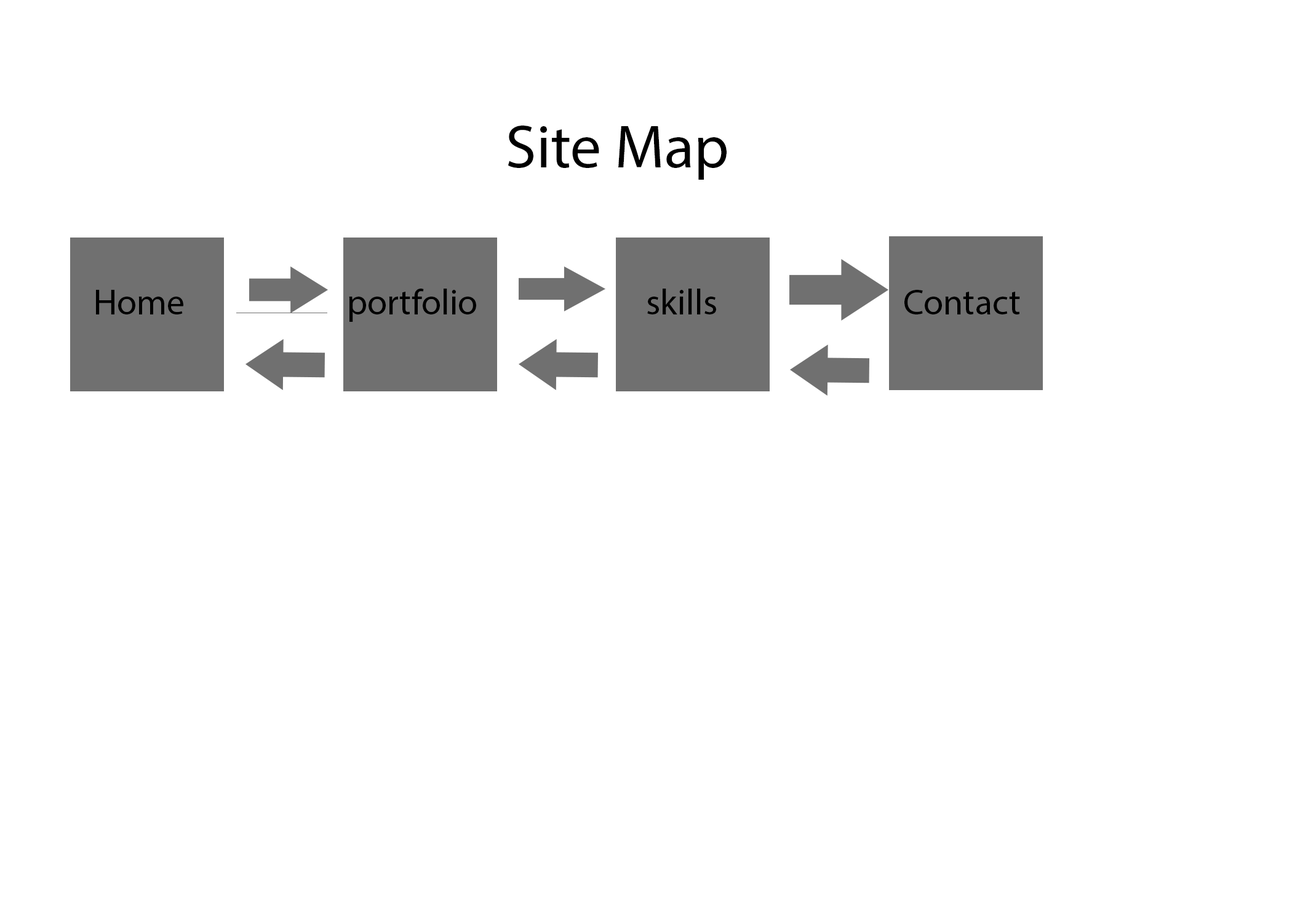
<style>
.page{position:relative;width:1292px;height:923px;background:#ffffff}
.page>*{position:absolute;margin:0}
.t1{font:61.5px "MyriadPro-Regular";color:#000000}
.t2{font:35.9px "MyriadPro-Regular";color:#000000}
</style>
<div class="page">
<p class="t1" style="left:508px;top:126px;width:219px;height:54px">Site Map</p>
<p class="t2" style="left:96px;top:290px;width:87px;height:24px">Home</p>
<p class="t2" style="left:349px;top:289px;width:127px;height:33px">portfolio</p>
<p class="t2" style="left:647px;top:289px;width:69px;height:25px">skills</p>
<p class="t2" style="left:904px;top:290px;width:116px;height:24px">Contact</p>
</div>
